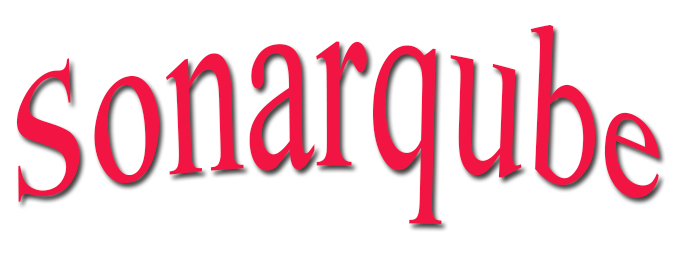
<style>
.page{position:relative;width:684px;height:265px;background:#ffffff}
.page>*{position:absolute;margin:0}
.t1{font:150.1px "TimesNewRomanPSMT";letter-spacing:0.01em;color:#f21544}
</style>
<div class="page">
<p class="t1" style="left:16px;top:24px;width:643px;height:200px">Sonarqube</p>
</div>
